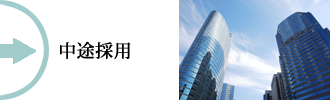
<style>
.page{position:relative;width:330px;height:100px;background:#ffffff}
.page>*{position:absolute;margin:0}
.t1{font:18px "KozMinPr6N-Medium";color:#000000;font-weight:bold}
</style>
<div class="page">
<p class="t1" style="left:60px;top:41px;width:71px;height:18px">中途採用</p>
</div>
